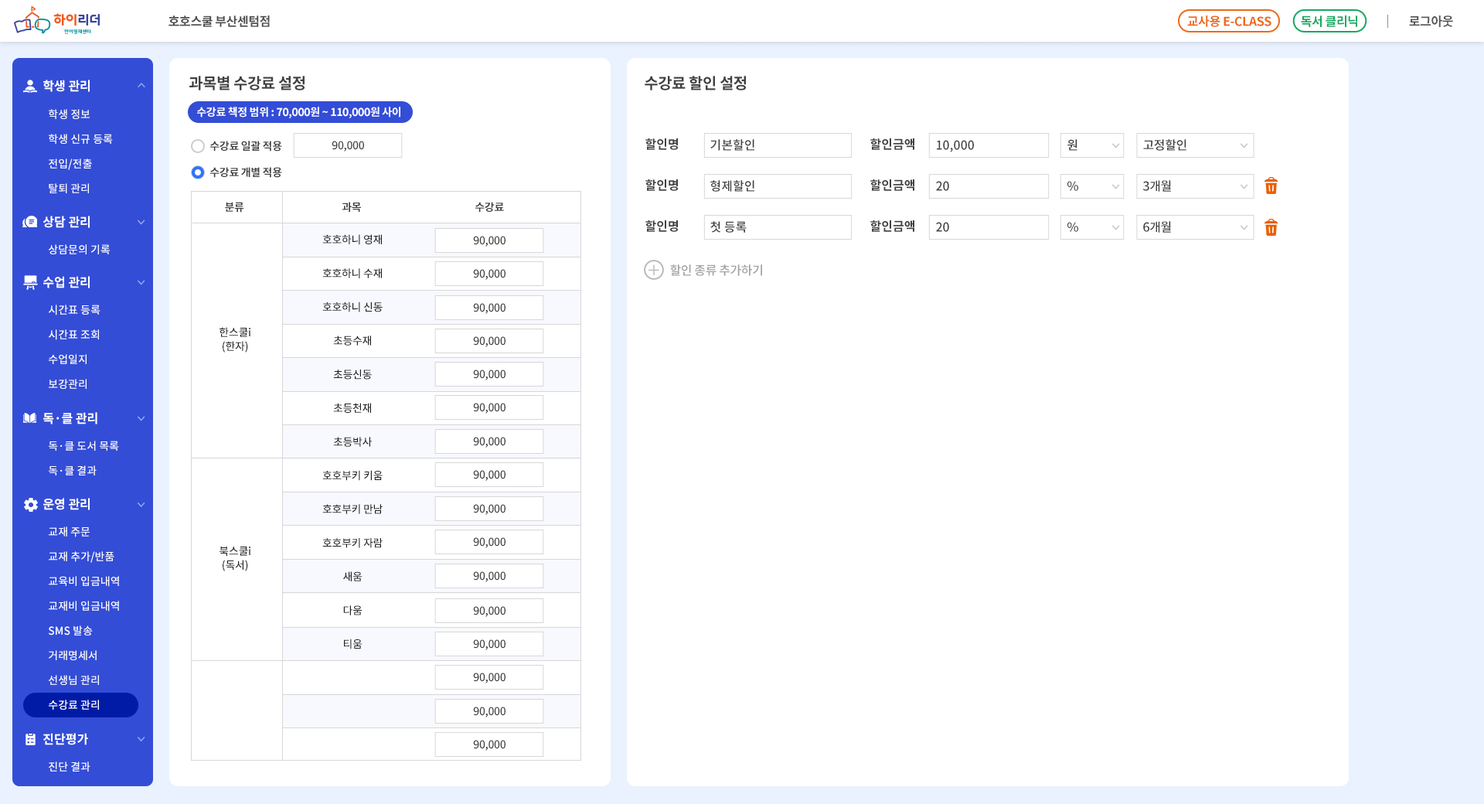
<style>
.page{position:relative;width:1484px;height:804px;background:#ffffff}
.page>*{position:absolute;margin:0}
.t1{font:12.4px "NotoSansCJKkr-Bold";letter-spacing:-0.025em;color:#4d4d4d}
.t2{font:12.4px "NotoSansCJKkr-Bold";letter-spacing:-0.025em;color:#ed6a1a}
.t3{font:12.4px "NotoSansCJKkr-Bold";letter-spacing:-0.025em;color:#13a961}
.t4{font:12.4px "NotoSansCJKkr-Bold";letter-spacing:-0.025em;color:#565656}
.t5{font:15.5px "NotoSansCJKkr-Bold";letter-spacing:-0.025em;color:#404040}
.t6{font:12.4px "NotoSansCJKkr-Bold";color:#ffffff}
.t7{font:10.8px/24.7px "NotoSansCJKkr-Medium";color:#ffffff}
.t8{font:10.8px "NotoSansCJKkr-Bold";letter-spacing:-0.025em;color:#ffffff}
.t9{font:10.8px "NotoSansCJKkr-Bold";letter-spacing:-0.025em;color:#404040}
.t10{font:10.8px "NotoSansCJKkr-Medium";letter-spacing:-0.025em;color:#404040}
.t11{font:12.4px "NotoSansCJKkr-Bold";color:#414040}
.t12{font:12.4px "NotoSansCJKkr-Medium";color:#414040}
.t13{font:12.4px "NotoSansCJKkr-Medium";letter-spacing:-0.025em;color:#414040}
.t14{font:10.8px "NotoSansCJKkr-Medium";color:#ffffff}
.t15{font:10.8px/33.7px "NotoSansCJKkr-Medium";letter-spacing:-0.025em;color:#212121}
.t16{font:12.4px "NotoSansCJKkr-Medium";letter-spacing:-0.025em;color:#a3a2a2}
.t17{font:10.8px/13.9px "NotoSansCJKkr-Medium";letter-spacing:-0.025em;color:#212121}
</style>
<div class="page">
<p class="t1" style="left:168px;top:15px;width:102px;height:12px">호호스쿨 부산센텀점</p>
<p class="t2" style="left:1187px;top:15px;width:84px;height:12px">교사용 E-CLASS</p>
<p class="t3" style="left:1301px;top:15px;width:56px;height:12px">독서 클리닉</p>
<p class="t4" style="left:1409px;top:15px;width:44px;height:12px">로그아웃</p>
<p class="t5" style="left:189px;top:76px;width:115px;height:14px">과목별 수강료 설정</p>
<p class="t5" style="left:644px;top:76px;width:102px;height:14px">수강료 할인 설정</p>
<p class="t6" style="left:43px;top:80px;width:47px;height:12px">학생 관리</p>
<p class="t7" style="left:49px;top:109px;width:64px;height:84px">학생 정보<br>학생 신규 등록<br>전입/전출<br>탈퇴 관리</p>
<p class="t8" style="left:197px;top:107px;width:203px;height:11px">수강료 책정 범위 : 70,000원 ~ 110,000원 사이</p>
<p class="t9" style="left:210px;top:141px;width:72px;height:10px">수강료 일괄 적용</p>
<p class="t10" style="left:332px;top:141px;width:32px;height:10px">90,000</p>
<p class="t11" style="left:645px;top:138px;width:33px;height:12px">할인명</p>
<p class="t12" style="left:710px;top:139px;width:44px;height:12px">기본할인</p>
<p class="t11" style="left:870px;top:138px;width:44px;height:12px">할인금액</p>
<p class="t12" style="left:937px;top:140px;width:37px;height:12px">10,000</p>
<p class="t12" style="left:1067px;top:139px;width:10px;height:12px">원</p>
<p class="t13" style="left:1143px;top:139px;width:43px;height:12px">고정할인</p>
<p class="t9" style="left:210px;top:167px;width:72px;height:11px">수강료 개별 적용</p>
<p class="t11" style="left:645px;top:179px;width:33px;height:12px">할인명</p>
<p class="t12" style="left:710px;top:180px;width:44px;height:12px">형제할인</p>
<p class="t11" style="left:870px;top:179px;width:44px;height:12px">할인금액</p>
<p class="t12" style="left:936px;top:181px;width:13px;height:10px">20</p>
<p class="t12" style="left:1067px;top:181px;width:11px;height:10px">%</p>
<p class="t13" style="left:1142px;top:180px;width:29px;height:12px">3개월</p>
<p class="t9" style="left:225px;top:202px;width:19px;height:11px">분류</p>
<p class="t9" style="left:342px;top:202px;width:19px;height:10px">과목</p>
<p class="t9" style="left:475px;top:202px;width:29px;height:11px">수강료</p>
<p class="t6" style="left:43px;top:216px;width:47px;height:12px">상담 관리</p>
<p class="t11" style="left:645px;top:220px;width:33px;height:12px">할인명</p>
<p class="t12" style="left:710px;top:221px;width:36px;height:12px">첫 등록</p>
<p class="t11" style="left:870px;top:220px;width:44px;height:12px">할인금액</p>
<p class="t12" style="left:936px;top:222px;width:13px;height:10px">20</p>
<p class="t12" style="left:1067px;top:222px;width:11px;height:10px">%</p>
<p class="t13" style="left:1143px;top:221px;width:28px;height:12px">6개월</p>
<p class="t14" style="left:49px;top:244px;width:61px;height:10px">상담문의 기록</p>
<p class="t15" style="left:322px;top:234px;width:61px;height:415px;text-align:center">호호하니 영재<br>호호하니 수재<br>호호하니 신동<br>초등수재<br>초등신동<br>초등천재<br>초등박사<br>호호부키 키움<br>호호부키 만남<br>호호부키 자람<br>새움<br>다움<br>티움</p>
<p class="t10" style="left:473px;top:236px;width:32px;height:11px">90,000</p>
<p class="t10" style="left:473px;top:269px;width:32px;height:11px">90,000</p>
<p class="t16" style="left:670px;top:264px;width:92px;height:12px">할인 종류 추가하기</p>
<p class="t6" style="left:43px;top:276px;width:47px;height:12px">수업 관리</p>
<p class="t7" style="left:49px;top:304px;width:51px;height:85px">시간표 등록<br>시간표 조회<br>수업일지<br>보강관리</p>
<p class="t10" style="left:473px;top:303px;width:32px;height:11px">90,000</p>
<p class="t17" style="left:219px;top:327px;width:31px;height:25px;text-align:center">한스쿨i<br>(한자)</p>
<p class="t10" style="left:473px;top:336px;width:32px;height:11px">90,000</p>
<p class="t10" style="left:473px;top:369px;width:32px;height:11px">90,000</p>
<p class="t6" style="left:43px;top:412px;width:54px;height:12px">독·클 관리</p>
<p class="t10" style="left:473px;top:403px;width:32px;height:10px">90,000</p>
<p class="t10" style="left:473px;top:437px;width:32px;height:10px">90,000</p>
<p class="t7" style="left:49px;top:440px;width:70px;height:35px">독·클 도서 목록<br>독·클 결과</p>
<p class="t10" style="left:473px;top:470px;width:32px;height:11px">90,000</p>
<p class="t6" style="left:43px;top:498px;width:47px;height:12px">운영 관리</p>
<p class="t10" style="left:473px;top:504px;width:32px;height:11px">90,000</p>
<p class="t7" style="left:49px;top:526px;width:70px;height:183px">교재 주문<br>교재 추가/반품<br>교육비 입금내역<br>교재비 입금내역<br>SMS 발송<br>거래명세서<br>선생님 관리<br>수강료 관리</p>
<p class="t17" style="left:219px;top:546px;width:31px;height:25px;text-align:center">북스쿨i<br>(독서)</p>
<p class="t10" style="left:473px;top:537px;width:32px;height:11px">90,000</p>
<p class="t10" style="left:473px;top:571px;width:32px;height:11px">90,000</p>
<p class="t10" style="left:473px;top:606px;width:32px;height:11px">90,000</p>
<p class="t10" style="left:473px;top:639px;width:32px;height:11px">90,000</p>
<p class="t10" style="left:473px;top:672px;width:32px;height:11px">90,000</p>
<p class="t10" style="left:473px;top:706px;width:32px;height:11px">90,000</p>
<p class="t6" style="left:43px;top:733px;width:45px;height:12px">진단평가</p>
<p class="t10" style="left:473px;top:740px;width:32px;height:10px">90,000</p>
<p class="t14" style="left:49px;top:761px;width:41px;height:10px">진단 결과</p>
</div>
